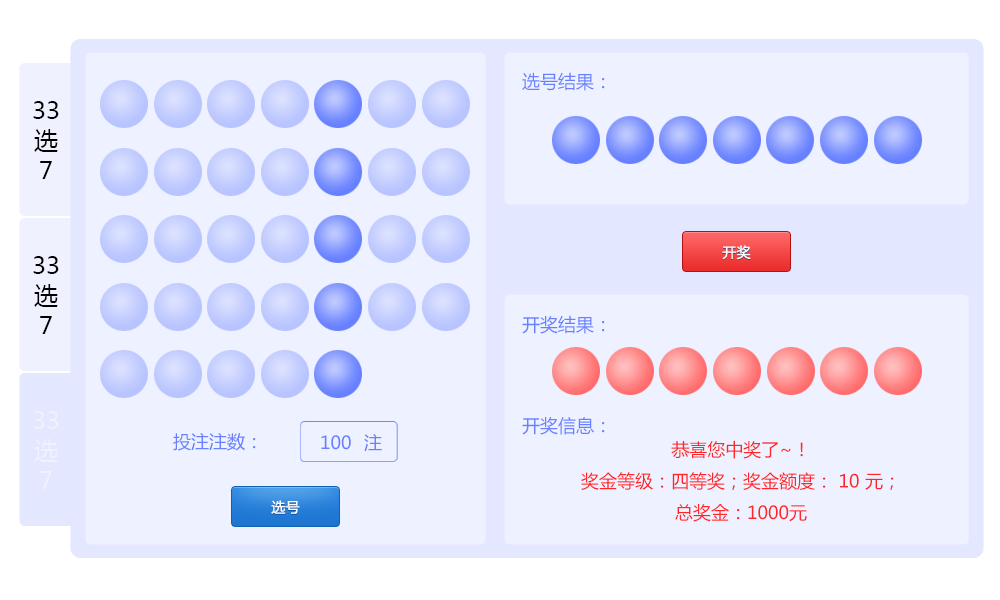
<style>
.page{position:relative;width:1000px;height:600px;background:#eef1ff}
.page>*{position:absolute;margin:0}
.t1{font:18px "MicrosoftYaHei";color:#6780ff}
.t2{font:24px/30px "MicrosoftYaHei";color:#000000}
.t3{font:14px "MicrosoftYaHei";letter-spacing:0.02em;color:#ffffff}
.t4{font:24px/30px "MicrosoftYaHei";color:#eff1ff}
.t5{font:18px "MicrosoftYaHei";color:#fe2626}
</style>
<div class="page">
<p class="t1" style="left:522px;top:72px;width:83px;height:19px">选号结果：</p>
<p class="t2" style="left:33px;top:101px;width:26px;height:78px;text-align:center">33<br>选<br>7</p>
<p class="t3" style="left:722px;top:245px;width:29px;height:15px">开奖</p>
<p class="t2" style="left:33px;top:256px;width:26px;height:78px;text-align:center">33<br>选<br>7</p>
<p class="t1" style="left:522px;top:315px;width:83px;height:19px">开奖结果：</p>
<p class="t4" style="left:33px;top:411px;width:26px;height:78px;text-align:center">33<br>选<br>7</p>
<p class="t1" style="left:522px;top:417px;width:83px;height:18px">开奖信息：</p>
<p class="t1" style="left:173px;top:433px;width:83px;height:18px">投注注数：</p>
<p class="t1" style="left:321px;top:435px;width:30px;height:15px">100</p>
<p class="t1" style="left:364px;top:434px;width:18px;height:18px">注</p>
<p class="t5" style="left:581px;top:440px;width:313px;height:82px;text-align:center">恭喜您中奖了~！<br>奖金等级：四等奖；奖金额度： 10 元；<br>总奖金：1000元</p>
<p class="t3" style="left:271px;top:500px;width:29px;height:14px">选号</p>
</div>
